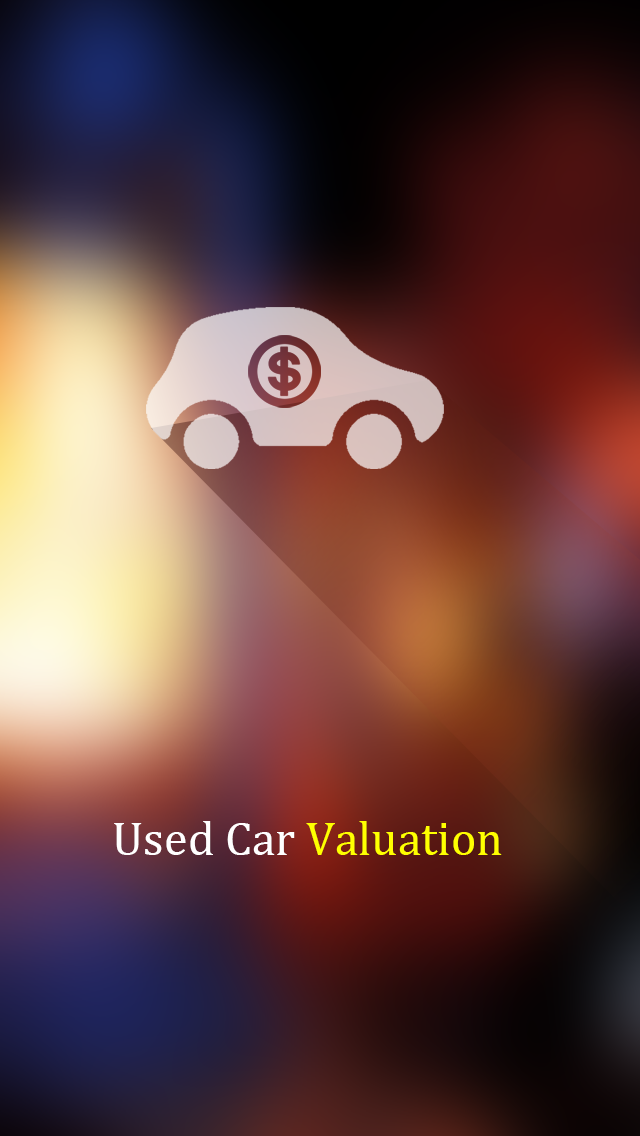
<style>
.page{position:relative;width:640px;height:1136px}
.page>*{position:absolute;margin:0}
.t1{font:48px "Cambria";color:#ffff00}
.t2{font:48px "Cambria";color:#ffffff}
</style>
<div class="page">
<p class="t1" style="left:114px;top:821px;width:388px;height:34px"><span class="t2">Used Car </span>Valuation</p>
</div>
